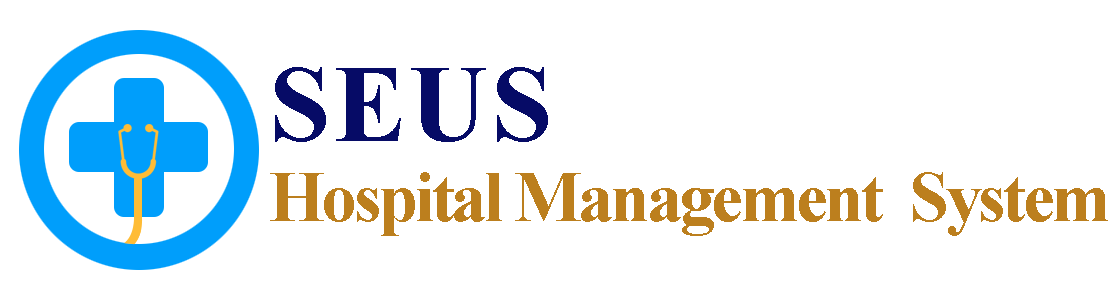
<style>
.page{position:relative;width:1116px;height:300px;background:#ffffff}
.page>*{position:absolute;margin:0}
.t1{font:72px/80px "TimesNewRomanPS-BoldMT";letter-spacing:-0.05em;color:#bc7f1e}
.t2{font:110px/80px "TimesNewRomanPS-BoldMT";letter-spacing:0.025em;color:#060b66}
</style>
<div class="page">
<p class="t1" style="left:270px;top:67px;width:838px;height:169px"><span class="t2">SEUS<br></span>Hospital Management  System</p>
</div>
